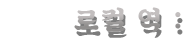
<style>
.page{position:relative;width:184px;height:40px;background:#ffffff}
.page>*{position:absolute;margin:0}
.t1{font:26.9px "SDKukdetopokki-bBd";letter-spacing:0.08em}
</style>
<div class="page">
<p class="t1" style="left:74px;top:7px;width:107px;height:25px">로컬 역 :</p>
</div>
